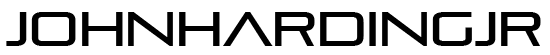
<style>
.page{position:relative;width:550px;height:55px;background:#ffffff}
.page>*{position:absolute;margin:0}
.t1{font:48px "PirulenRg-Regular";color:#000000}
</style>
<div class="page">
<p class="t1" style="left:6px;top:12px;width:535px;height:34px">Johnhardingjr</p>
</div>
